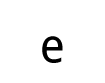
<style>
.page{position:relative;width:105px;height:83px;background:#ffffff}
.page>*{position:absolute;margin:0}
.t1{font:47.9px "DroidSans";color:#000000}
</style>
<div class="page">
<p class="t1" style="left:42px;top:36px;width:21px;height:27px">e</p>
</div>
